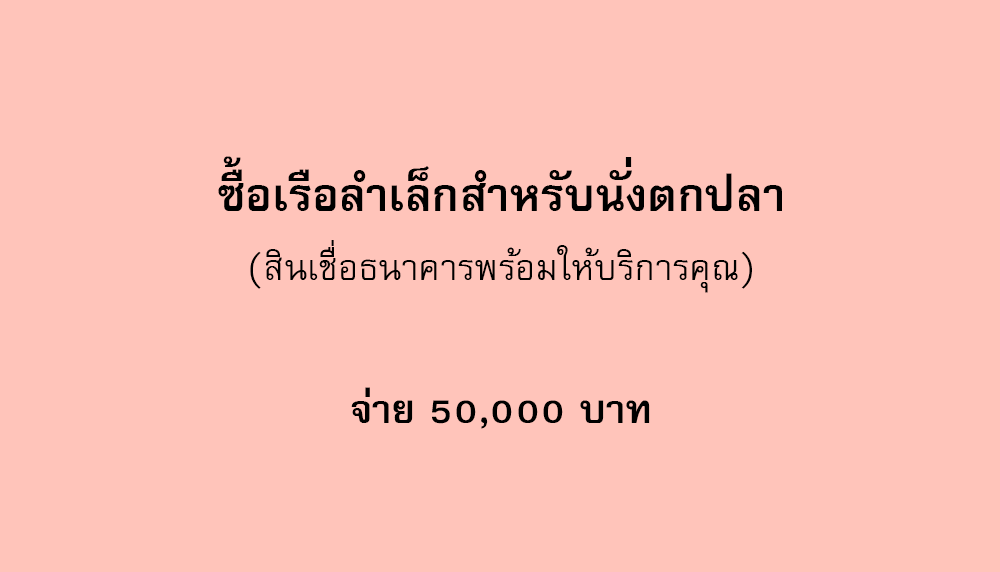
<style>
.page{position:relative;width:1000px;height:572px;background:#ffc4ba}
.page>*{position:absolute;margin:0}
.t1{font:64px "FreesiaUPCBold";color:#000000}
.t2{font:50px "FreesiaUPC";color:#000000}
.t3{font:56px "FreesiaUPCBold";color:#000000}
</style>
<div class="page">
<p class="t1" style="left:218px;top:156px;width:564px;height:55px">ซื้อเรือลำเล็กสำหรับนั่งตกปลา</p>
<p class="t2" style="left:250px;top:240px;width:502px;height:53px">(สินเชื่อธนาคารพร้อมให้บริการคุณ)</p>
<p class="t3" style="left:351px;top:387px;width:299px;height:42px">จ่าย 50,000 บาท</p>
</div>
